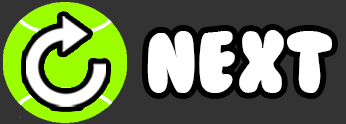
<style>
.page{position:relative;width:346px;height:124px;background:#333333}
.page>*{position:absolute;margin:0}
.t1{font:80px "BubbleGum";color:#ffffff}
</style>
<div class="page">
<p class="t1" style="left:147px;top:30px;width:185px;height:63px">next</p>
</div>
